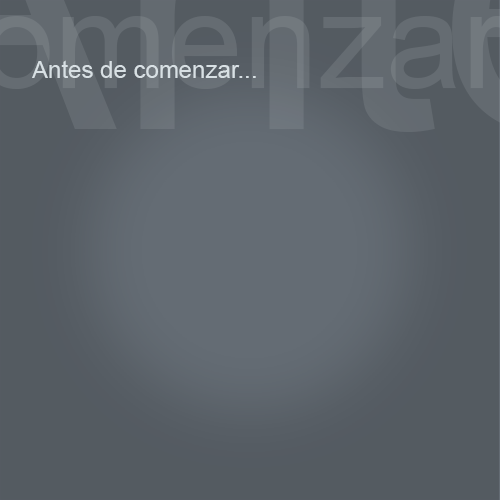
<style>
.page{position:relative;width:500px;height:500px;background:#545b61}
.page>*{position:absolute;margin:0}
.t1{font:24px "ArialMT";color:#d8e0e4}
</style>
<div class="page">
<p class="t1" style="left:32px;top:60px;width:224px;height:18px">Antes de comenzar...</p>
</div>
